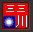
<style>
.page{position:relative;width:33px;height:32px;background:#f20000}
.page>*{position:absolute;margin:0}
.t1{font:10.4px "SimSun";color:#ffffff}
.t2{font:11.7px "SimSun";color:#ffffff}
</style>
<div class="page">
<p class="t1" style="left:6px;top:5px;width:19px;height:7px">三三</p>
<p class="t2" style="left:16px;top:15px;width:11px;height:12px">川</p>
</div>
